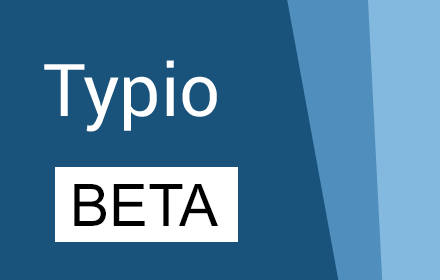
<style>
.page{position:relative;width:440px;height:280px;background:#19537b}
.page>*{position:absolute;margin:0}
.t1{font:72.7px "Roboto-Regular";color:#ffffff}
.t2{font:58.4px "ArialMT";color:#000000}
</style>
<div class="page">
<p class="t1" style="left:44px;top:60px;width:173px;height:72px">Typio</p>
<p class="t2" style="left:74px;top:184px;width:144px;height:42px">BETA</p>
</div>
